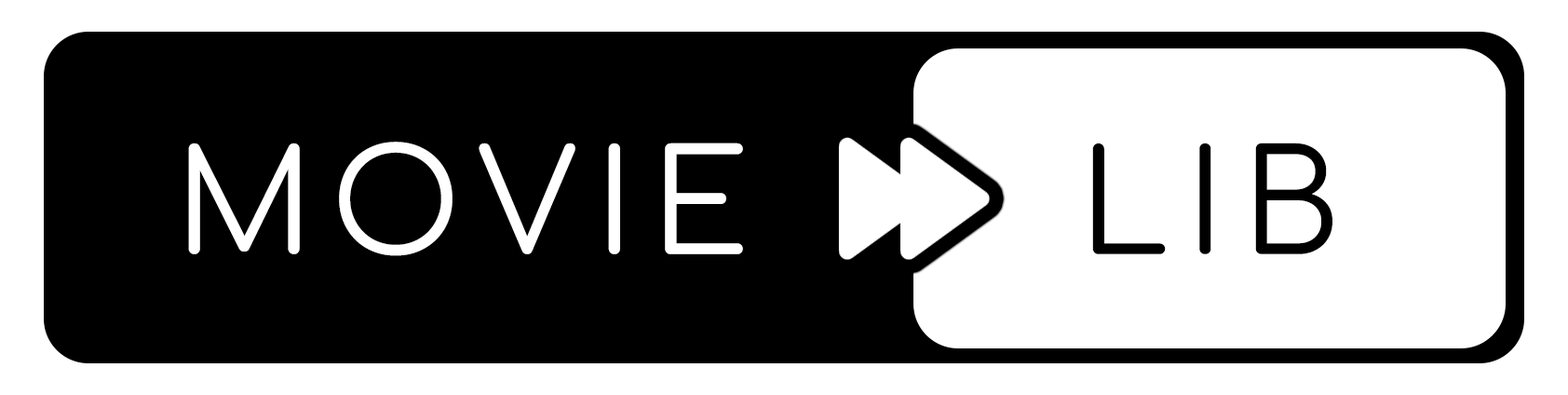
<style>
.page{position:relative;width:1568px;height:395px;background:#ffffff}
.page>*{position:absolute;margin:0}
.t1{font:141.5px "Comfortaa-Regular";letter-spacing:0.12em;color:#ffffff}
.t2{font:141.5px "Comfortaa-Regular";letter-spacing:0.12em;color:#000000}
</style>
<div class="page">
<p class="t1" style="left:188px;top:142px;width:555px;height:114px">MOVIE</p>
<p class="t2" style="left:1092px;top:142px;width:240px;height:112px">LIB</p>
</div>
